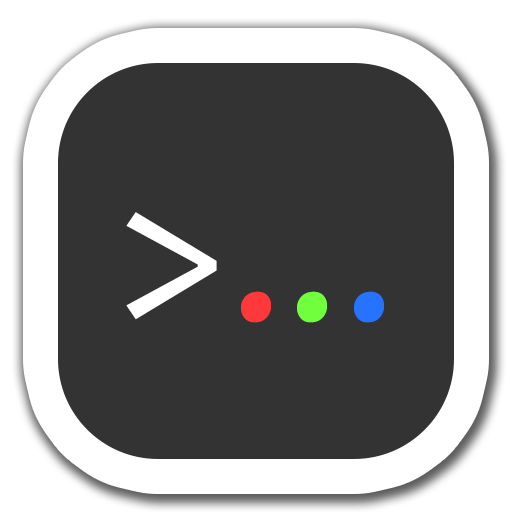
<style>
.page{position:relative;width:512px;height:512px;background:#333333}
.page>*{position:absolute;margin:0}
.t1{font:224px "Candara";color:#ffffff}
.t2{font:224px "Candara";color:#ff3939}
.t3{font:224px "Candara";color:#6fff3d}
.t4{font:224px "Candara";color:#2673ff}
</style>
<div class="page">
<p class="t1" style="left:126px;top:212px;width:258px;height:111px">&gt;<span class="t2">.</span><span class="t3">.</span><span class="t4">.</span></p>
</div>
